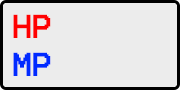
<style>
.page{position:relative;width:180px;height:90px;background:#ececec}
.page>*{position:absolute;margin:0}
.t1{font:26px "Terminal";color:#ff0000;font-weight:bold}
.t2{font:26px "Terminal";color:#002aff;font-weight:bold}
</style>
<div class="page">
<p class="t1" style="left:13px;top:14px;width:38px;height:24px">HP</p>
<p class="t2" style="left:13px;top:52px;width:38px;height:24px">MP</p>
</div>
